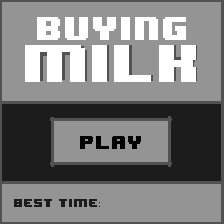
<style>
.page{position:relative;width:224px;height:224px;background:#949494}
.page>*{position:absolute;margin:0}
.t1{font:27.8px "8BITWONDERNominal";color:#ffffff}
.t2{font:44.8px "8BITWONDERNominal";color:#ffffff}
.t3{font:15.8px "8BITWONDERNominal";color:#000000}
.t4{font:10px "8BITWONDERNominal";color:#1c1c1c}
.t5{font:10px "MyriadPro-Regular";color:#1c1c1c}
</style>
<div class="page">
<p class="t1" style="left:37px;top:17px;width:149px;height:23px">buying</p>
<p class="t2" style="left:25px;top:45px;width:171px;height:37px">MILK</p>
<p class="t3" style="left:80px;top:136px;width:61px;height:13px">PLAY</p>
<p class="t4" style="left:14px;top:199px;width:86px;height:8px">BEST TIME<span class="t5">:</span></p>
</div>
